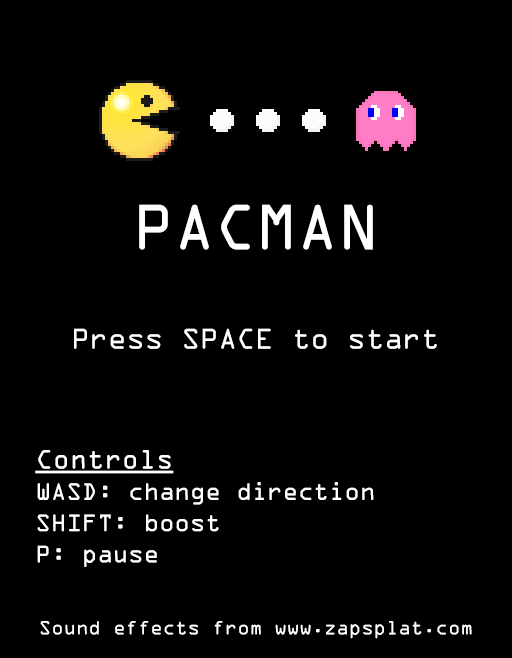
<style>
.page{position:relative;width:512px;height:658px;background:#000000}
.page>*{position:absolute;margin:0}
.t1{font:69px "OCRAExtended";letter-spacing:-0.01em;color:#ffffff}
.t2{font:31px "OCRAExtended";letter-spacing:-0.01em;color:#ffffff}
.t3{font:26px "OCRAExtended";letter-spacing:-0.01em;color:#ffffff}
.t4{font:29px "OCRAExtended";letter-spacing:-0.01em;color:#ffffff;text-decoration:underline}
.t5{font:20.9px "OCRAExtended";letter-spacing:-0.01em;color:#ffffff}
</style>
<div class="page">
<p class="t1" style="left:139px;top:204px;width:234px;height:46px">PACMAN</p>
<p class="t2" style="left:74px;top:328px;width:363px;height:21px">Press SPACE to start</p>
<p class="t3" style="left:35px;top:450px;width:339px;height:117px"><span class="t4">Controls<br></span>WASD: change direction<br>SHIFT: boost<br>P: pause</p>
<p class="t5" style="left:40px;top:621px;width:432px;height:18px">Sound effects from www.zapsplat.com</p>
</div>
